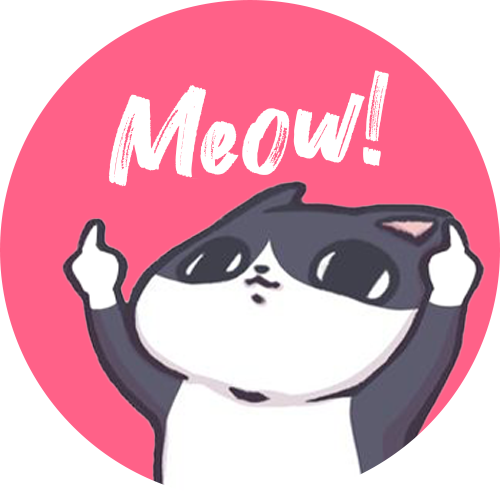
<style>
.page{position:relative;width:500px;height:500px;background:#ffffff}
.page>*{position:absolute;margin:0}
.t1{font:127.8px "Hey-August";color:#ffffff}
</style>
<div class="page">
<p class="t1" style="left:108px;top:70px;width:281px;height:117px;rotate:-5deg">Meow!</p>
</div>
